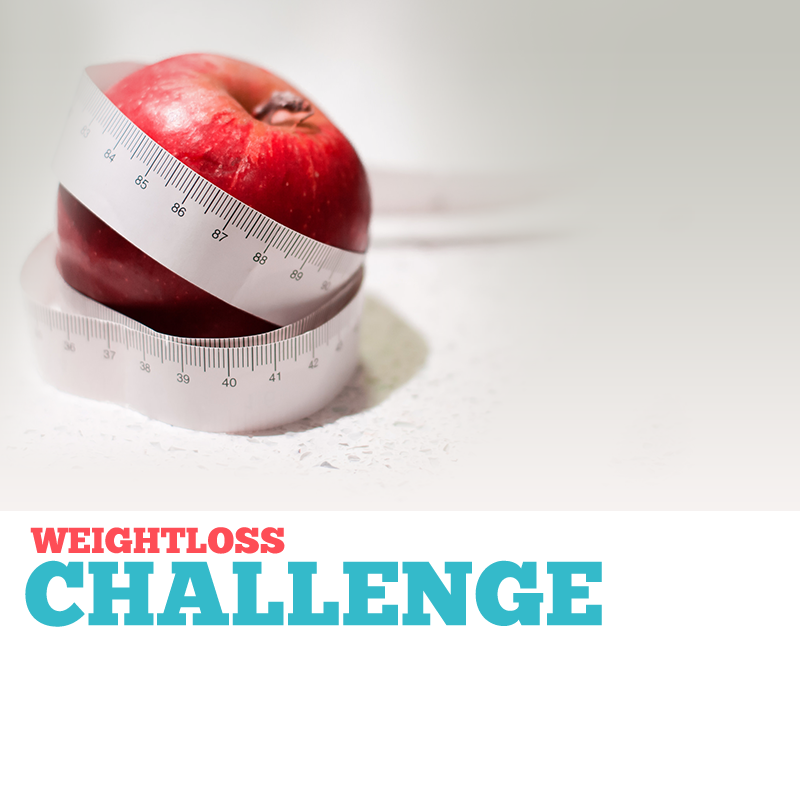
<style>
.page{position:relative;width:800px;height:800px;background:#ffffff}
.page>*{position:absolute;margin:0}
.t1{font:36px "ChunkFive-Roman";color:#fe4d56}
.t2{font:90.7px "ChunkFive-Roman";color:#34baca}
</style>
<div class="page">
<p class="t1" style="left:30px;top:527px;width:255px;height:27px">WEIGHTLOSS</p>
<p class="t2" style="left:25px;top:560px;width:577px;height:67px">CHALLENGE</p>
</div>
